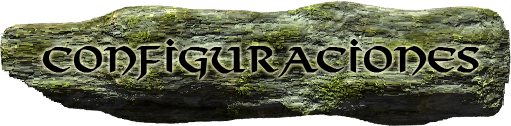
<style>
.page{position:relative;width:511px;height:126px}
.page>*{position:absolute;margin:0}
.t1{font:34px "Viking-Medium";color:#000000;font-weight:bold}
</style>
<div class="page">
<p class="t1" style="left:42px;top:39px;width:437px;height:42px">configuraciones</p>
</div>
